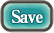
<style>
.page{position:relative;width:54px;height:33px}
.page>*{position:absolute;margin:0}
.t1{font:17px "RyuminPro-ExBold";letter-spacing:-0.08em;color:#ffffff;font-weight:bold;scale:0.9 1}
</style>
<div class="page">
<p class="t1" style="left:11px;top:9px;width:32px;height:14px">Save</p>
</div>
